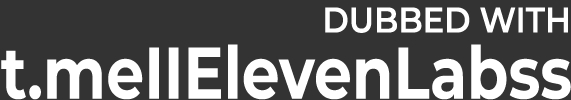
<style>
.page{position:relative;width:571px;height:100px;background:#333333}
.page>*{position:absolute;margin:0}
.t1{font:35.6px "Montserrat-SemiBold";color:#ffffff;scale:0.9 1}
.t2{font:73.1px "Montserrat-Bold";color:#ffffff;scale:0.82 1}
</style>
<div class="page">
<p class="t1" style="left:325px;top:7px;width:243px;height:26px">DUBBED WITH</p>
<p class="t2" style="left:1px;top:44px;width:570px;height:56px">t.meIIElevenLabss</p>
</div>
